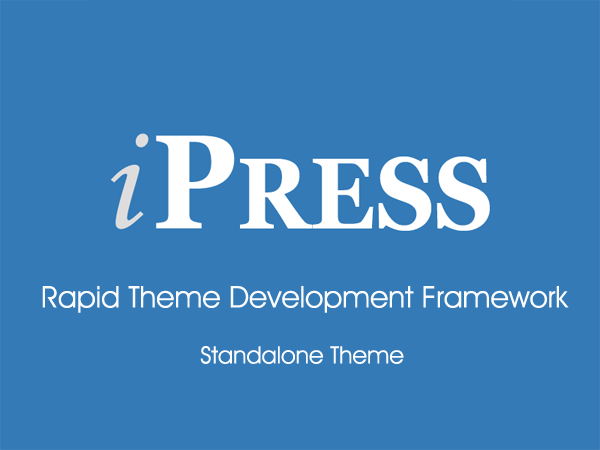
<style>
.page{position:relative;width:600px;height:450px;background:#337ab7}
.page>*{position:absolute;margin:0}
.t1{font:30px "Decker-Regular";color:#fcfcfc}
.t2{font:24px "Decker-Regular";color:#fcfcfc}
</style>
<div class="page">
<p class="t1" style="left:42px;top:286px;width:527px;height:27px">Rapid Theme Development Framework</p>
<p class="t2" style="left:200px;top:346px;width:204px;height:18px">Standalone Theme</p>
</div>
